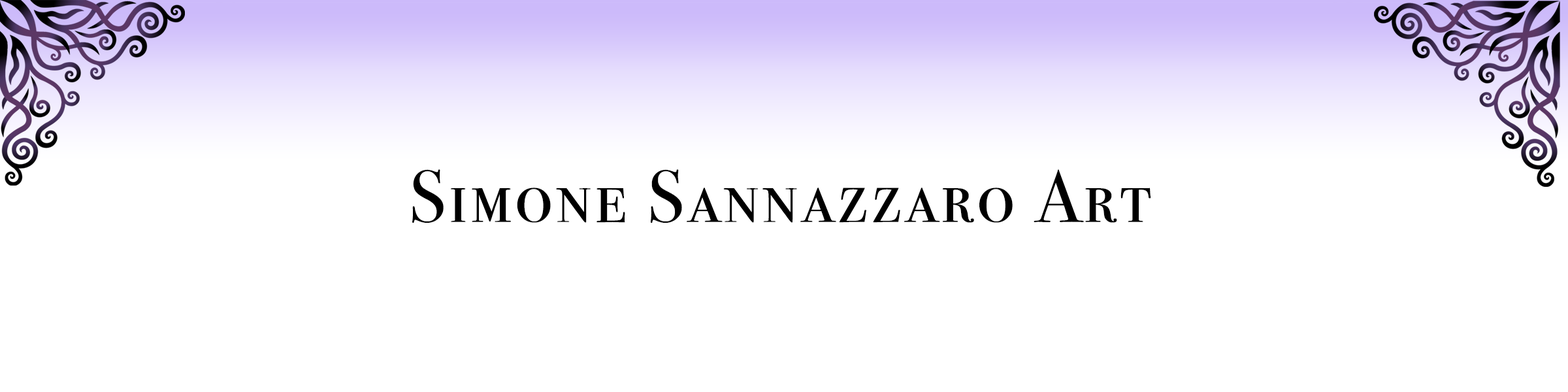
<style>
.page{position:relative;width:1568px;height:392px;background:#ffffff}
.page>*{position:absolute;margin:0}
.t1{font:74px "BodoniSvtyTwoSCITCTT-Book";letter-spacing:0.05em;color:#000000}
</style>
<div class="page">
<p class="t1" style="left:412px;top:169px;width:739px;height:54px">Simone Sannazzaro Art</p>
</div>
